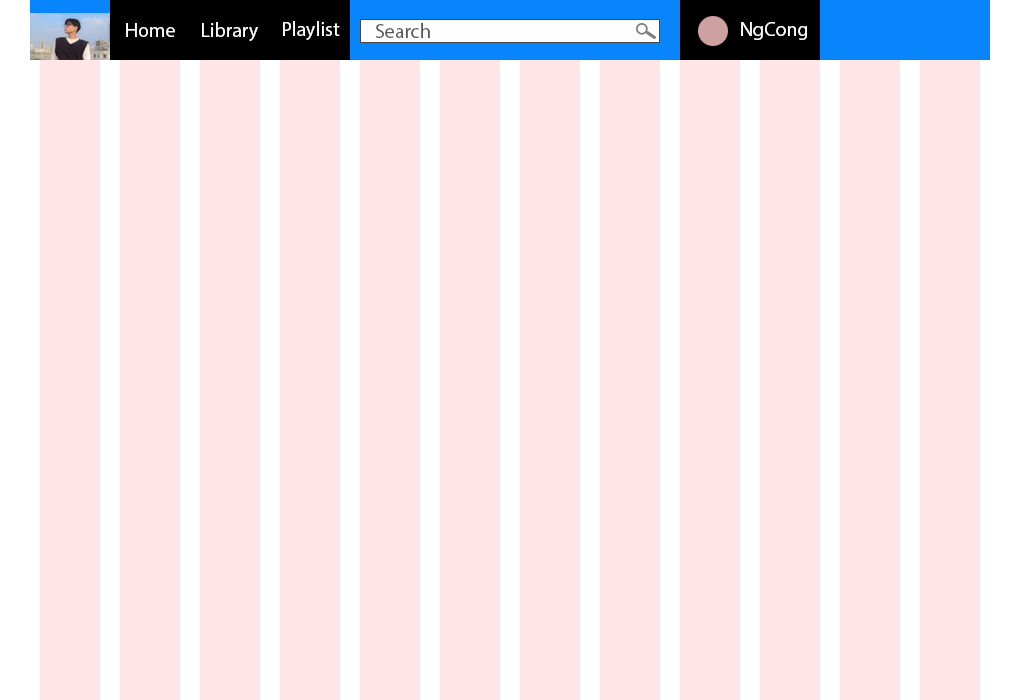
<style>
.page{position:relative;width:1020px;height:700px;background:#ffe5e5}
.page>*{position:absolute;margin:0}
.t1{font:20px "MyriadPro-Regular";color:#ffffff}
.t2{font:20px "MyriadPro-Regular";color:#575757}
</style>
<div class="page">
<p class="t1" style="left:126px;top:23px;width:49px;height:14px">Home</p>
<p class="t1" style="left:202px;top:22px;width:56px;height:19px">Library</p>
<p class="t1" style="left:283px;top:21px;width:57px;height:19px">Playlist</p>
<p class="t2" style="left:376px;top:23px;width:54px;height:15px">Search</p>
<p class="t1" style="left:741px;top:22px;width:66px;height:18px">NgCong</p>
</div>
